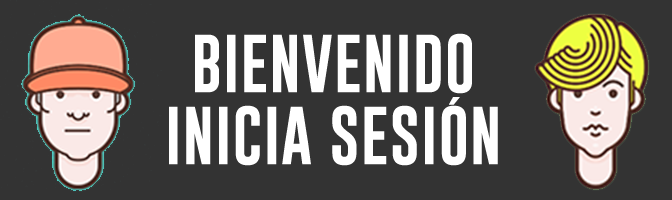
<style>
.page{position:relative;width:672px;height:200px;background:#333333}
.page>*{position:absolute;margin:0}
.t1{font:60px "Gobold";letter-spacing:0.02em;color:#ffffff}
</style>
<div class="page">
<p class="t1" style="left:169px;top:33px;width:329px;height:133px;text-align:center">BIENVENIDO<br>INICIA SESIÓN</p>
</div>
